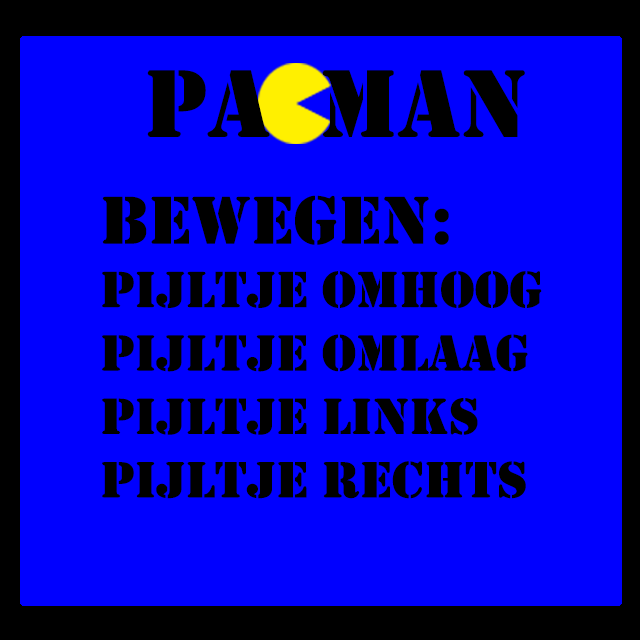
<style>
.page{position:relative;width:640px;height:640px;background:#0000ff}
.page>*{position:absolute;margin:0}
.t1{font:100px "Stencil";color:#000000}
.t2{font:52.8px "Stencil";color:#000000;scale:1.03 1}
.t3{font:70.5px "Stencil";color:#000000;scale:1.03 1}
</style>
<div class="page">
<p class="t1" style="left:147px;top:70px;width:378px;height:67px">Pa  man</p>
<p class="t2" style="left:102px;top:195px;width:440px;height:304px"><span class="t3">Bewegen:<br></span>Pijltje omhoog<br>pijltje omlaag<br>pijltje links<br>pijltje rechts</p>
</div>
